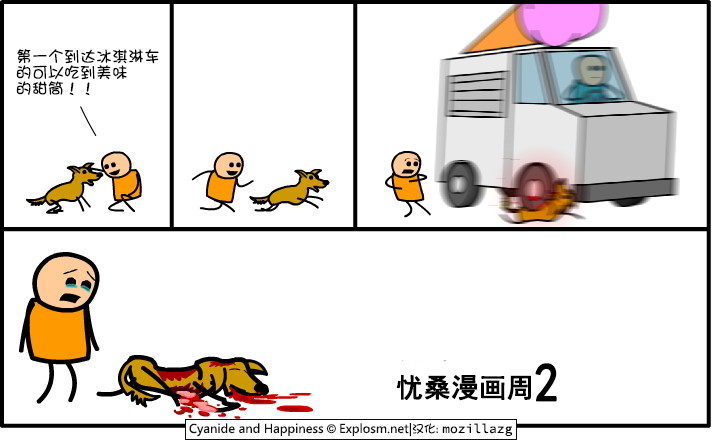
<style>
.page{position:relative;width:712px;height:441px;background:#ffffff}
.page>*{position:absolute;margin:0}
.t1{font:16px/16px "DFGirl";color:#000000}
.t2{font:27px "SimHei";color:#000000;font-weight:bold}
.t3{font:54.2px "SimHei";letter-spacing:0.18em;color:#000000;font-weight:bold;scale:0.88 1}
</style>
<div class="page">
<p class="t1" style="left:16px;top:49px;width:143px;height:46px">第一个到达冰淇淋车<br>的可以吃到美味<br>的甜筒！！</p>
<p class="t2" style="left:396px;top:363px;width:161px;height:39px">忧桑漫画周<span class="t3">2</span></p>
</div>
